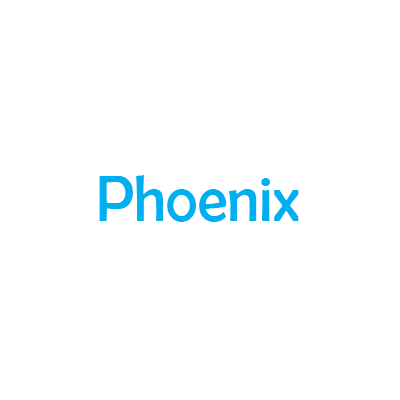
<style>
.page{position:relative;width:400px;height:400px;background:#ffffff}
.page>*{position:absolute;margin:0}
.t1{font:66.4px "BerlinSansFB-Reg";color:#00aff0;scale:0.92 1}
</style>
<div class="page">
<p class="t1" style="left:99px;top:175px;width:200px;height:47px">Phoenix</p>
</div>
